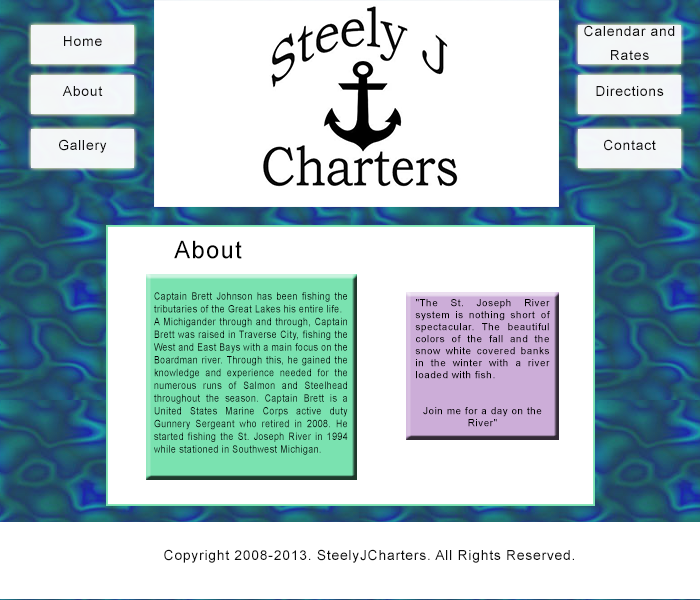
<style>
.page{position:relative;width:700px;height:600px;background:#ffffff}
.page>*{position:absolute;margin:0}
.t1{font:24.1px "ArialMT";letter-spacing:0.05em;color:#000000}
.t2{font:10.6px "ArialMT";letter-spacing:0.05em;color:#000000;scale:0.83 1}
.t3{font:10px "ArialMT";letter-spacing:0.05em;color:#000000}
</style>
<div class="page">
<p class="t1" style="left:174px;top:240px;width:68px;height:19px">About</p>
<p class="t2" style="left:154px;top:292px;width:194px;height:163px;text-align:justify">Captain Brett Johnson has been fishing the tributaries of the Great Lakes his entire life. <br>A Michigander through and through, Captain Brett was raised in Traverse City, fishing the West and East Bays with a main focus on the Boardman river. Through this, he gained the knowledge and experience needed for the numerous runs of Salmon and Steelhead throughout the season. Captain Brett is a United States Marine Corps active duty Gunnery Sergeant who retired in 2008. He started fishing the St. Joseph River in 1994 while stationed in Southwest Michigan.</p>
<p class="t3" style="left:415px;top:299px;width:135px;height:128px;text-align:justify">"The St. Joseph River system is nothing short of spectacular. The beautiful colors of the fall and the snow white covered banks in the winter with a river loaded with fish. <br><br><br>Join me for a day on the River"</p>
</div>
